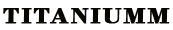
<style>
.page{position:relative;width:173px;height:30px;background:#ffffff}
.page>*{position:absolute;margin:0}
.t1{font:22px "BodoniMT-Bold";letter-spacing:0.05em;color:#080601;font-weight:bold;scale:1.23 1}
</style>
<div class="page">
<p class="t1" style="left:3px;top:8px;width:167px;height:16px">TITANIUMM</p>
</div>
